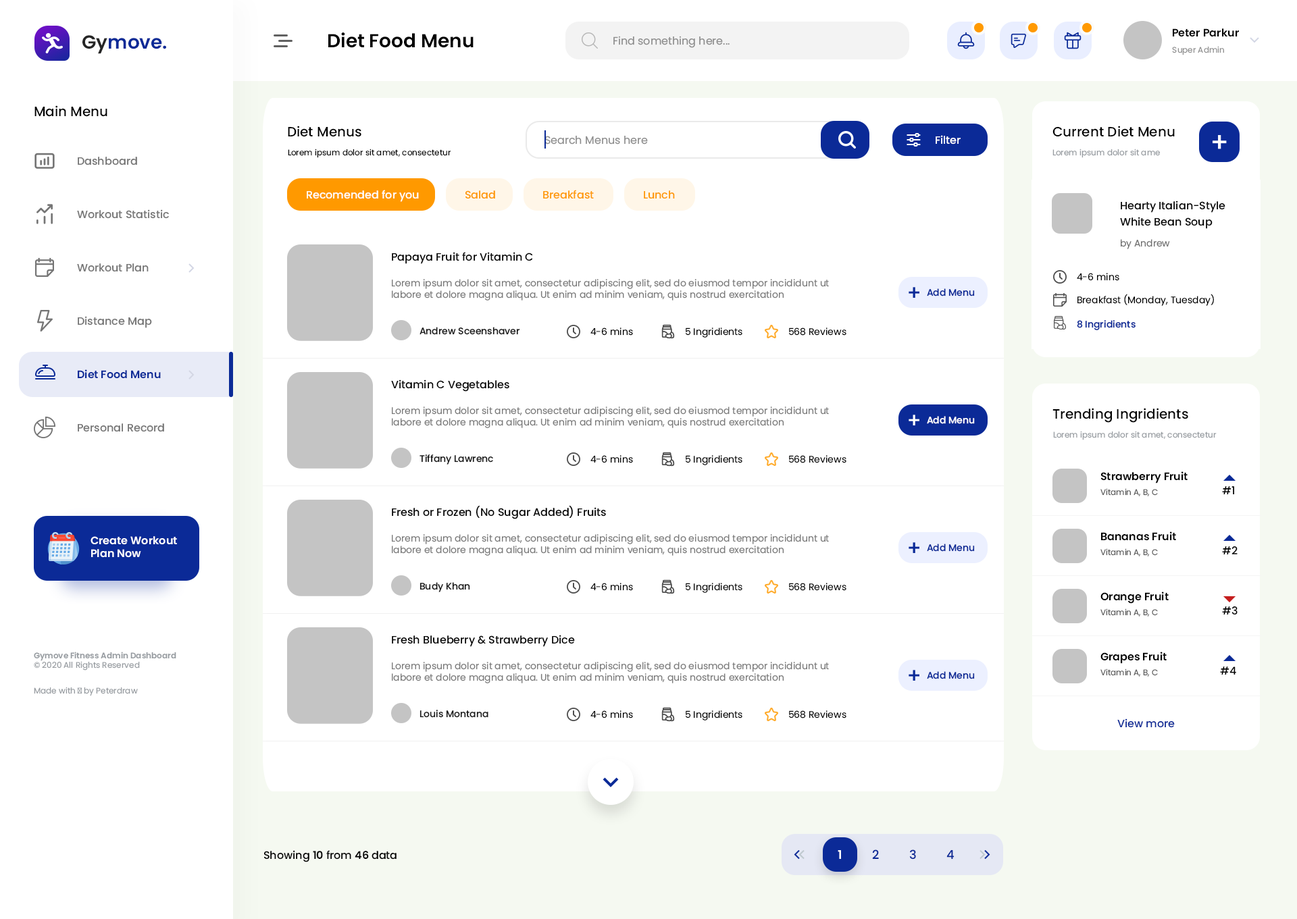
<style>
.page{position:relative;width:1297px;height:919px;background:#ffffff}
.page>*{position:absolute;margin:0}
.t1{font:10.8px "Poppins-SemiBold";color:#000000}
.t2{font:18.9px "Poppins-SemiBold";color:#0b2a97}
.t3{font:18.9px "Poppins-SemiBold";color:#262626}
.t4{font:18.9px "Poppins-SemiBold";color:#000000}
.t5{font:10.8px "Poppins-Regular";color:#8d8d8d}
.t6{font:8.1px "Poppins-Regular";color:#8f8f8f}
.t7{font:13.5px "Poppins-Medium";color:#000000}
.t8{font:10.8px "Poppins-Medium";color:#ffffff}
.t9{font:8.1px "Poppins-Regular";color:#000000}
.t10{font:8.1px "Poppins-Regular";color:#969ba0}
.t11{font:10.8px "Poppins-Medium";color:#757575}
.t12{font:10.8px "Poppins-Medium";color:#ff9900}
.t13{font:10.8px/16.2px "Poppins-Medium";color:#000000}
.t14{font:9.5px "Poppins-Regular";color:#727272}
.t15{font:10.8px "Poppins-Medium";color:#000000}
.t16{font:9.5px "Poppins-Regular";color:#7a7a7a}
.t17{font:9.5px "Poppins-Regular";color:#000000}
.t18{font:9.5px "Poppins-Medium";color:#0b2a97}
.t19{font:9.5px "Poppins-Medium";color:#1d1d1d}
.t20{font:10.8px "Poppins-SemiBold";color:#0b2a97}
.t21{font:9.5px "Poppins-Medium";color:#ffffff}
.t22{font:8.1px "Poppins-Regular";color:#585858}
.t23{font:10.8px "Poppins-SemiBold";color:#ffffff}
.t24{font:8.1px "Poppins-SemiBold";color:#969ba0}
.t25{font:10.8px "Poppins-Medium";color:#0b2a97}
.t26{font:12.2px "Poppins-SemiBold";color:#ffffff}
.t27{font:12.2px "Poppins-Medium";color:#0b2a97}
</style>
<div class="page">
<p class="t1" style="left:1173px;top:28px;width:66px;height:9px">Peter Parkur</p>
<p class="t2" style="left:82px;top:35px;width:84px;height:19px"><span class="t3">Gy</span>move.</p>
<p class="t4" style="left:328px;top:32px;width:146px;height:16px">Diet Food Menu</p>
<p class="t5" style="left:613px;top:36px;width:117px;height:12px">Find something here...</p>
<p class="t6" style="left:1172px;top:46px;width:52px;height:9px">Super Admin</p>
<p class="t7" style="left:34px;top:105px;width:73px;height:12px">Main Menu</p>
<p class="t7" style="left:288px;top:126px;width:73px;height:11px">Diet Menus</p>
<p class="t7" style="left:1052px;top:126px;width:123px;height:11px">Current Diet Menu</p>
<p class="t5" style="left:544px;top:136px;width:104px;height:9px">Search Menus here</p>
<p class="t8" style="left:936px;top:135px;width:25px;height:10px">Filter</p>
<p class="t9" style="left:288px;top:149px;width:163px;height:9px">Lorem ipsum dolor sit amet, consectetur</p>
<p class="t10" style="left:1052px;top:149px;width:108px;height:9px">Lorem ipsum dolor sit ame</p>
<p class="t11" style="left:78px;top:157px;width:59px;height:9px">Dashboard</p>
<p class="t8" style="left:307px;top:190px;width:112px;height:12px">Recomended for you</p>
<p class="t12" style="left:465px;top:190px;width:30px;height:9px">Salad</p>
<p class="t12" style="left:543px;top:190px;width:51px;height:9px">Breakfast</p>
<p class="t12" style="left:644px;top:190px;width:31px;height:9px">Lunch</p>
<p class="t11" style="left:77px;top:209px;width:92px;height:10px">Workout Statistic</p>
<p class="t13" style="left:1120px;top:201px;width:105px;height:28px">Hearty Italian-Style White Bean Soup</p>
<p class="t14" style="left:1121px;top:239px;width:49px;height:10px">by Andrew</p>
<p class="t15" style="left:392px;top:252px;width:141px;height:12px">Papaya Fruit for Vitamin C</p>
<p class="t11" style="left:77px;top:263px;width:72px;height:9px">Workout Plan</p>
<p class="t16" style="left:392px;top:279px;width:437px;height:22px">Lorem ipsum dolor sit amet, consectetur adipiscing elit, sed do eiusmod tempor incididunt ut labore et dolore magna aliqua. Ut enim ad minim veniam, quis nostrud exercitation</p>
<p class="t17" style="left:1077px;top:273px;width:42px;height:8px">4-6 mins</p>
<p class="t18" style="left:927px;top:288px;width:48px;height:9px">Add Menu</p>
<p class="t17" style="left:1077px;top:294px;width:137px;height:12px">Breakfast (Monday, Tuesday)</p>
<p class="t11" style="left:78px;top:316px;width:74px;height:12px">Distance Map</p>
<p class="t19" style="left:419px;top:327px;width:101px;height:8px">Andrew Sceenshaver</p>
<p class="t17" style="left:590px;top:328px;width:43px;height:8px">4-6 mins</p>
<p class="t17" style="left:686px;top:328px;width:56px;height:10px">5 Ingridients</p>
<p class="t17" style="left:789px;top:328px;width:57px;height:8px">568 Reviews</p>
<p class="t18" style="left:1077px;top:320px;width:59px;height:10px">8 Ingridients</p>
<p class="t20" style="left:78px;top:370px;width:83px;height:9px">Diet Food Menu</p>
<p class="t15" style="left:391px;top:380px;width:118px;height:12px">Vitamin C Vegetables</p>
<p class="t16" style="left:392px;top:407px;width:437px;height:21px">Lorem ipsum dolor sit amet, consectetur adipiscing elit, sed do eiusmod tempor incididunt ut labore et dolore magna aliqua. Ut enim ad minim veniam, quis nostrud exercitation</p>
<p class="t7" style="left:1052px;top:408px;width:136px;height:15px">Trending Ingridients</p>
<p class="t11" style="left:78px;top:424px;width:86px;height:8px">Personal Record</p>
<p class="t21" style="left:927px;top:416px;width:48px;height:8px">Add Menu</p>
<p class="t10" style="left:1053px;top:431px;width:164px;height:9px">Lorem ipsum dolor sit amet, consectetur</p>
<p class="t19" style="left:419px;top:455px;width:74px;height:10px">Tiffany Lawrenc</p>
<p class="t17" style="left:590px;top:455px;width:43px;height:8px">4-6 mins</p>
<p class="t17" style="left:686px;top:455px;width:56px;height:10px">5 Ingridients</p>
<p class="t17" style="left:789px;top:455px;width:57px;height:8px">568 Reviews</p>
<p class="t1" style="left:1100px;top:472px;width:88px;height:12px">Strawberry Fruit</p>
<p class="t22" style="left:1100px;top:488px;width:58px;height:9px">Vitamin A, B, C</p>
<p class="t15" style="left:1222px;top:486px;width:12px;height:8px">#1</p>
<p class="t15" style="left:392px;top:506px;width:214px;height:13px">Fresh or Frozen (No Sugar Added) Fruits</p>
<p class="t1" style="left:1101px;top:532px;width:75px;height:9px">Bananas Fruit</p>
<p class="t23" style="left:91px;top:536px;width:86px;height:22px">Create Workout Plan Now</p>
<p class="t16" style="left:392px;top:534px;width:437px;height:22px">Lorem ipsum dolor sit amet, consectetur adipiscing elit, sed do eiusmod tempor incididunt ut labore et dolore magna aliqua. Ut enim ad minim veniam, quis nostrud exercitation</p>
<p class="t18" style="left:927px;top:544px;width:48px;height:8px">Add Menu</p>
<p class="t22" style="left:1100px;top:549px;width:58px;height:8px">Vitamin A, B, C</p>
<p class="t15" style="left:1222px;top:546px;width:16px;height:9px">#2</p>
<p class="t19" style="left:419px;top:582px;width:51px;height:10px">Budy Khan</p>
<p class="t17" style="left:590px;top:583px;width:43px;height:8px">4-6 mins</p>
<p class="t17" style="left:686px;top:583px;width:56px;height:10px">5 Ingridients</p>
<p class="t17" style="left:789px;top:583px;width:57px;height:8px">568 Reviews</p>
<p class="t1" style="left:1100px;top:592px;width:69px;height:12px">Orange Fruit</p>
<p class="t22" style="left:1100px;top:609px;width:58px;height:8px">Vitamin A, B, C</p>
<p class="t15" style="left:1222px;top:607px;width:16px;height:8px">#3</p>
<p class="t15" style="left:392px;top:635px;width:183px;height:12px">Fresh Blueberry &amp; Strawberry Dice</p>
<p class="t24" style="left:34px;top:652px;width:142px;height:19px">Gymove Fitness Admin Dashboard<br><span class="t10">© 2020 All Rights Reserved</span></p>
<p class="t1" style="left:1100px;top:652px;width:67px;height:12px">Grapes Fruit</p>
<p class="t16" style="left:392px;top:662px;width:437px;height:22px">Lorem ipsum dolor sit amet, consectetur adipiscing elit, sed do eiusmod tempor incididunt ut labore et dolore magna aliqua. Ut enim ad minim veniam, quis nostrud exercitation</p>
<p class="t18" style="left:927px;top:671px;width:48px;height:9px">Add Menu</p>
<p class="t22" style="left:1100px;top:669px;width:58px;height:8px">Vitamin A, B, C</p>
<p class="t15" style="left:1220px;top:667px;width:16px;height:8px">#4</p>
<p class="t10" style="left:34px;top:687px;width:104px;height:9px">Made with ♥ by Peterdraw</p>
<p class="t19" style="left:419px;top:710px;width:69px;height:8px">Louis Montana</p>
<p class="t17" style="left:590px;top:711px;width:43px;height:8px">4-6 mins</p>
<p class="t17" style="left:686px;top:711px;width:56px;height:10px">5 Ingridients</p>
<p class="t17" style="left:789px;top:711px;width:57px;height:8px">568 Reviews</p>
<p class="t25" style="left:1117px;top:719px;width:58px;height:9px">View more</p>
<p class="t15" style="left:264px;top:850px;width:133px;height:13px">Showing <span class="t1">10 </span>from <span class="t1">46 </span>data</p>
<p class="t26" style="left:838px;top:850px;width:3px;height:9px">1</p>
<p class="t27" style="left:872px;top:850px;width:7px;height:9px">2</p>
<p class="t27" style="left:909px;top:850px;width:7px;height:10px">3</p>
<p class="t27" style="left:946px;top:850px;width:9px;height:10px">4</p>
</div>
